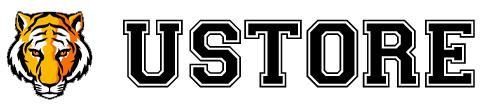
<style>
.page{position:relative;width:489px;height:108px;background:#ffffff}
.page>*{position:absolute;margin:0}
.t1{font:96.9px "Varsity-Regular";color:#000000}
</style>
<div class="page">
<p class="t1" style="left:123px;top:19px;width:352px;height:69px">USTORE</p>
</div>
